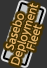
<style>
.page{position:relative;width:47px;height:68px;background:#333333}
.page>*{position:absolute;margin:0}
.t1{font:10px/10px "UDShinGoPro-Light";color:#e4b46d;font-weight:bold}
</style>
<div class="page">
<p class="t1" style="left:5px;top:3px;width:37px;height:63px;text-align:center;rotate:-72deg">Sasebo<br>Deployment<br>Fleet</p>
</div>
